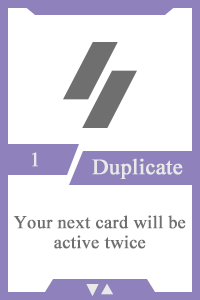
<style>
.page{position:relative;width:200px;height:300px;background:#ffffff}
.page>*{position:absolute;margin:0}
.t1{font:20px "TimesNewRomanPSMT";color:#e9e9e9;font-weight:bold}
.t2{font:22px "TimesNewRomanPSMT";color:#e9e9e9;font-weight:bold}
.t3{font:18px/20px "TimesNewRomanPSMT";color:#6f6f6f;font-weight:bold}
.t4{font:14px "AdobeHeitiStd-Regular";color:#e9e9e9;font-weight:bold}
</style>
<div class="page">
<p class="t1" style="left:32px;top:152px;width:6px;height:15px">1</p>
<p class="t2" style="left:92px;top:158px;width:91px;height:21px">Duplicate</p>
<p class="t3" style="left:13px;top:215px;width:173px;height:34px;text-align:center">Your next card will be active twice</p>
<p class="t4" style="left:86px;top:284px;width:27px;height:12px">▼▲</p>
</div>
